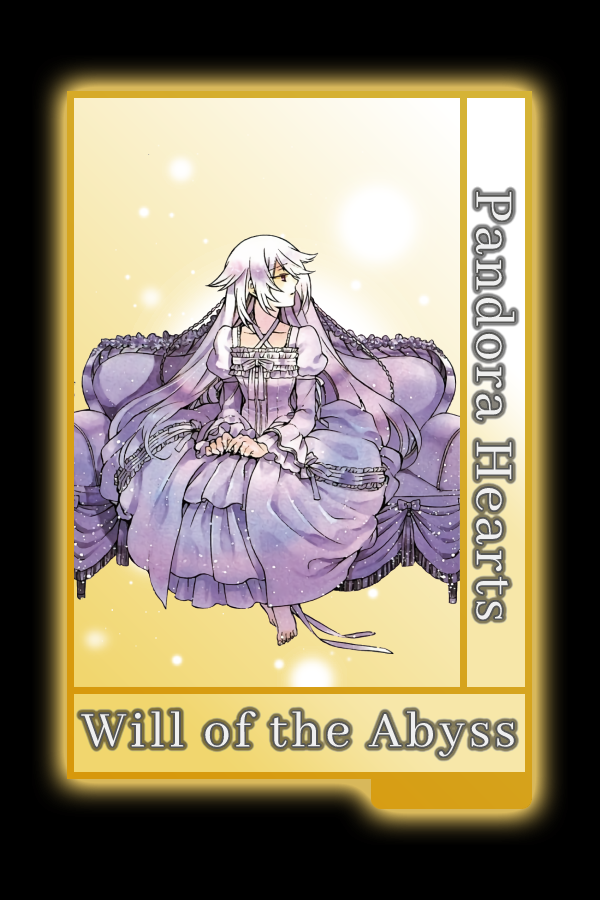
<style>
.page{position:relative;width:600px;height:900px;background:#000000}
.page>*{position:absolute;margin:0}
.t1{font:59.1px "AbhayaLibre-Regular";letter-spacing:0.072em;color:#efefef}
.t2{font:55px "AbhayaLibre-Regular";letter-spacing:0.072em;color:#efefef}
</style>
<div class="page">
<p class="t1" style="left:476px;top:192px;width:39px;height:428px;rotate:90deg">Pandora Hearts</p>
<p class="t2" style="left:81px;top:711px;width:433px;height:46px">Will of the Abyss</p>
</div>
